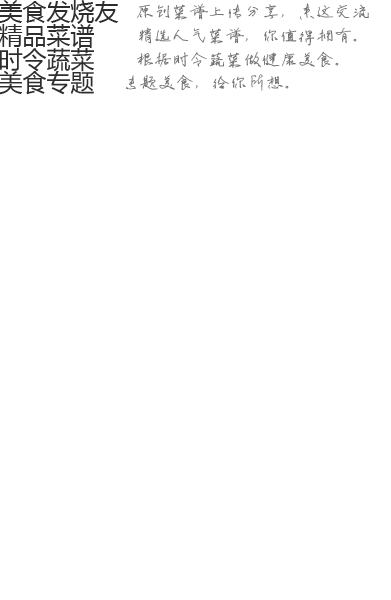
<style>
.page{position:relative;width:391px;height:600px;background:#ffffff}
.page>*{position:absolute;margin:0}
.t1{font:24px "MicrosoftYaHei";color:#2d2d2d}
.t2{font:18px "HYPingAnXingJ";color:#727272}
</style>
<div class="page">
<p class="t1" style="left:0px;top:0px;width:119px;height:24px">美食发烧友</p>
<p class="t2" style="left:137px;top:3px;width:232px;height:17px">原创菜谱上传分享，来这交流</p>
<p class="t1" style="left:0px;top:24px;width:94px;height:24px">精品菜谱</p>
<p class="t2" style="left:139px;top:27px;width:218px;height:19px">精选人气菜谱，你值得拥有。</p>
<p class="t1" style="left:0px;top:48px;width:94px;height:24px">时令蔬菜</p>
<p class="t2" style="left:137px;top:51px;width:202px;height:17px">根据时令蔬菜做健康美食。</p>
<p class="t1" style="left:0px;top:70px;width:94px;height:25px">美食专题</p>
<p class="t2" style="left:126px;top:74px;width:163px;height:17px">专题美食，给你所想。</p>
</div>
